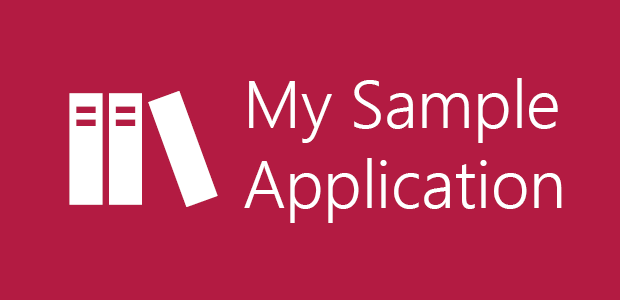
<style>
.page{position:relative;width:620px;height:300px;background:#b31b42}
.page>*{position:absolute;margin:0}
.t1{font:66.5px "SegoeUI-Semilight";color:#ffffff}
</style>
<div class="page">
<p class="t1" style="left:244px;top:78px;width:318px;height:145px">My Sample<br>Application</p>
</div>
